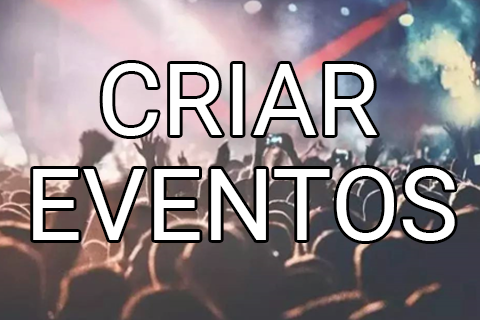
<style>
.page{position:relative;width:480px;height:320px}
.page>*{position:absolute;margin:0}
.t1{font:100px "Roboto-Regular";color:#ffffff}
</style>
<div class="page">
<p class="t1" style="left:102px;top:63px;width:275px;height:73px">CRIAR</p>
<p class="t1" style="left:33px;top:168px;width:422px;height:73px">EVENTOS</p>
</div>
